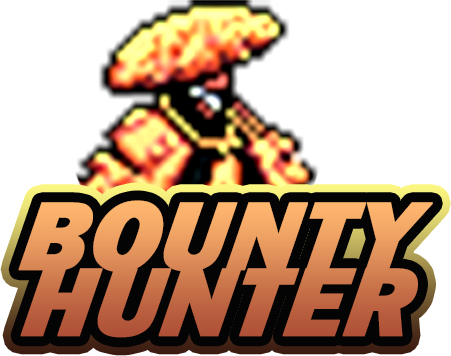
<style>
.page{position:relative;width:451px;height:356px;background:#ffffff}
.page>*{position:absolute;margin:0}
.t1{font:100px/66.7px "FranklinGothic-HeavyItalic";font-weight:bold;font-style:italic}
</style>
<div class="page">
<p class="t1" style="left:18px;top:200px;width:415px;height:138px;text-align:center">BOUNTY<br>HUNTER</p>
</div>
